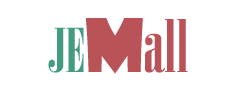
<style>
.page{position:relative;width:235px;height:92px;background:#ffffff}
.page>*{position:absolute;margin:0}
.t1{font:72px "Onyx";color:#b95358}
.t2{font:60px "Onyx";color:#439b81}
.t3{font:72px "ShowcardGothic-Reg";color:#b95358}
</style>
<div class="page">
<p class="t1" style="left:48px;top:18px;width:140px;height:56px"><span class="t2">JE</span><span class="t3">M</span>all</p>
</div>
